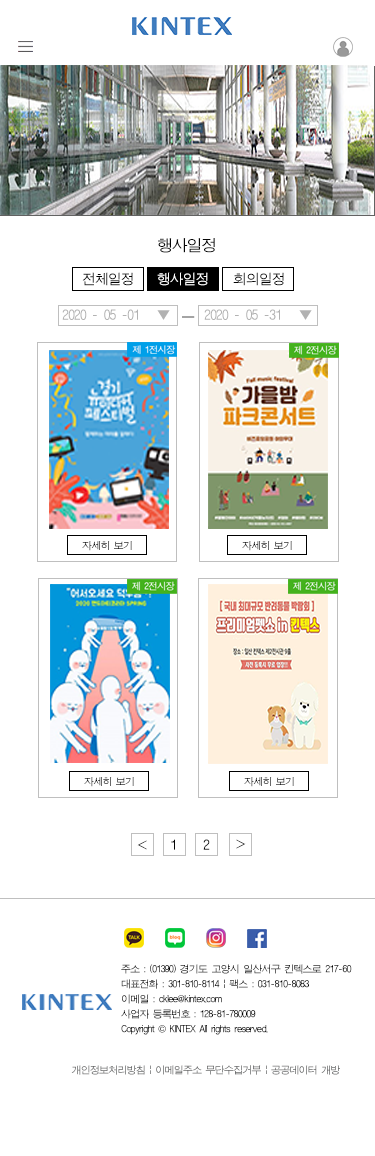
<style>
.page{position:relative;width:375px;height:1156px;background:#ffffff}
.page>*{position:absolute;margin:0}
.t1{font:16px "ÈÞ¸Õ°íµñ";letter-spacing:-0.08em;color:#060606}
.t2{font:14px "ÈÞ¸Õ°íµñ";letter-spacing:-0.08em;color:#010101}
.t3{font:14px "ÈÞ¸Õ°íµñ";letter-spacing:-0.08em;color:#fefefe}
.t4{font:14px "ÈÞ¸Õ°íµñ";letter-spacing:-0.08em;color:#020202}
.t5{font:14px "ÈÞ¸Õ°íµñ";letter-spacing:-0.08em;color:#b2b2b2}
.t6{font:14px "ÈÞ¸Õ°íµñ";letter-spacing:-0.08em}
.t7{font:14px "ÈÞ¸Õ°íµñ";letter-spacing:-0.08em;color:#040404}
.t8{font:10px/15px "ÈÞ¸Õ°íµñ";letter-spacing:-0.08em;color:#020202}
.t9{font:10px/15px "Gulim";letter-spacing:-0.08em;color:#020202}
.t10{font:10px "ÈÞ¸Õ°íµñ";letter-spacing:-0.08em}
</style>
<div class="page">
<p class="t1" style="left:158px;top:238px;width:57px;height:15px">행사일정</p>
<p class="t2" style="left:82px;top:272px;width:51px;height:14px">전체일정</p>
<p class="t3" style="left:157px;top:272px;width:51px;height:14px">행사일정</p>
<p class="t4" style="left:233px;top:272px;width:51px;height:14px">회의일정</p>
<p class="t5" style="left:62px;top:309px;width:108px;height:11px">2020 - 05 -01   ▼</p>
<p class="t6" style="left:182px;top:316px;width:13px;height:2px">ㅡ</p>
<p class="t5" style="left:204px;top:309px;width:108px;height:11px">2020 - 05 -31   ▼</p>
<p class="t7" style="left:171px;top:839px;width:4px;height:11px">1</p>
<p class="t7" style="left:203px;top:839px;width:7px;height:11px">2</p>
<p class="t8" style="left:121px;top:964px;width:231px;height:71px">주소 : (01390) 경기도 고양시 일산서구 킨텍스로 217-60<br>대표전화 : 301-810-8114 | 팩스 : 031-810-8083<br>이메일 : cklee@kintex.com <br>사업자 등록번호 : 128-81-780009<br>Copyright <span class="t9">©</span> KINTEX All rights reserved.</p>
<p class="t10" style="left:71px;top:1065px;width:269px;height:10px">개인정보처리방침 | 이메일주소 무단수집거부 | 공공데이터 개방</p>
</div>
